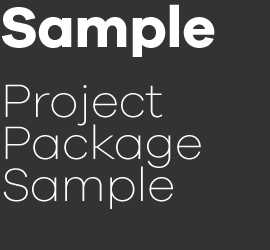
<style>
.page{position:relative;width:270px;height:250px;background:#333333}
.page>*{position:absolute;margin:0}
.t1{font:58.5px "GalanoGrotesque-Bold";letter-spacing:-0.01em;color:#ffffff}
.t2{font:48px/42px "GalanoGrotesque-ExtraLight";letter-spacing:-0.01em;color:#ffffff}
</style>
<div class="page">
<p class="t1" style="left:2px;top:4px;width:213px;height:53px">Sample</p>
<p class="t2" style="left:3px;top:84px;width:198px;height:125px">Project<br>Package<br>Sample</p>
</div>
